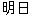
<style>
.page{position:relative;width:32px;height:16px;background:#ffffff}
.page>*{position:absolute;margin:0}
.t1{font:15px "OPPOSans-R";color:#000000}
</style>
<div class="page">
<p class="t1" style="left:3px;top:1px;width:25px;height:14px">明日</p>
</div>
